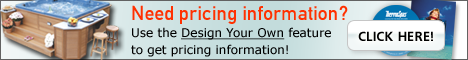
<style>
.page{position:relative;width:468px;height:60px}
.page>*{position:absolute;margin:0}
.t1{font:12px/17px "Verdana";color:#000000}
.t2{font:20px/17px "DinC";color:#ff3000}
.t3{font:12px/17px "Verdana";color:#000000;text-decoration:underline}
.t4{font:13px "font180";color:#000000}
</style>
<div class="page">
<p class="t1" style="left:131px;top:5px;width:217px;height:52px"><span class="t2">Need pricing information?<br></span>Use the <span class="t3">Design Your Own</span> feature<br>to get pricing information!</p>
<p class="t4" style="left:358px;top:31px;width:75px;height:10px">CLICK HERE!</p>
</div>
